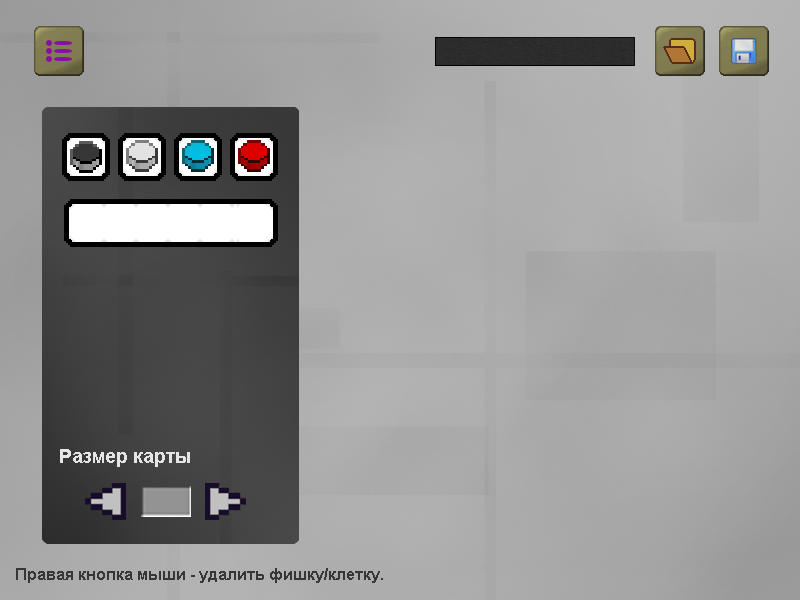
<style>
.page{position:relative;width:800px;height:600px}
.page>*{position:absolute;margin:0}
.t1{font:18.7px "Arial-BoldMT";color:#e5e5e5}
.t2{font:16px "Arial-BoldMT";color:#373737}
</style>
<div class="page">
<p class="t1" style="left:60px;top:449px;width:130px;height:18px">Размер карты</p>
<p class="t2" style="left:16px;top:568px;width:367px;height:15px">Правая кнопка мыши - удалить фишку/клетку.</p>
</div>
